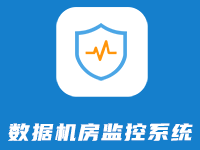
<style>
.page{position:relative;width:200px;height:150px;background:#157fcc}
.page>*{position:absolute;margin:0}
.t1{font:24px "YouSheBiaoTiHei";letter-spacing:0.05em;color:#ffffff}
</style>
<div class="page">
<p class="t1" style="left:8px;top:123px;width:185px;height:18px">数据机房监控系统</p>
</div>
